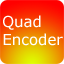
<style>
.page{position:relative;width:64px;height:64px}
.page>*{position:absolute;margin:0}
.t1{font:14.9px "Verdana";color:#ffffff}
</style>
<div class="page">
<p class="t1" style="left:3px;top:15px;width:60px;height:31px">Quad<br>Encoder</p>
</div>
